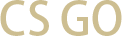
<style>
.page{position:relative;width:122px;height:36px;background:#ffffff}
.page>*{position:absolute;margin:0}
.t1{font:44.4px "AdobeHeitiStd-Regular";color:#cdbe91}
</style>
<div class="page">
<p class="t1" style="left:0px;top:0px;width:122px;height:36px">CS GO</p>
</div>
